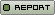
<style>
.page{position:relative;width:55px;height:15px}
.page>*{position:absolute;margin:0}
.t1{font:8px "BitDustTwo";color:#000000}
</style>
<div class="page">
<p class="t1" style="left:15px;top:5px;width:35px;height:5px">REPORT</p>
</div>
